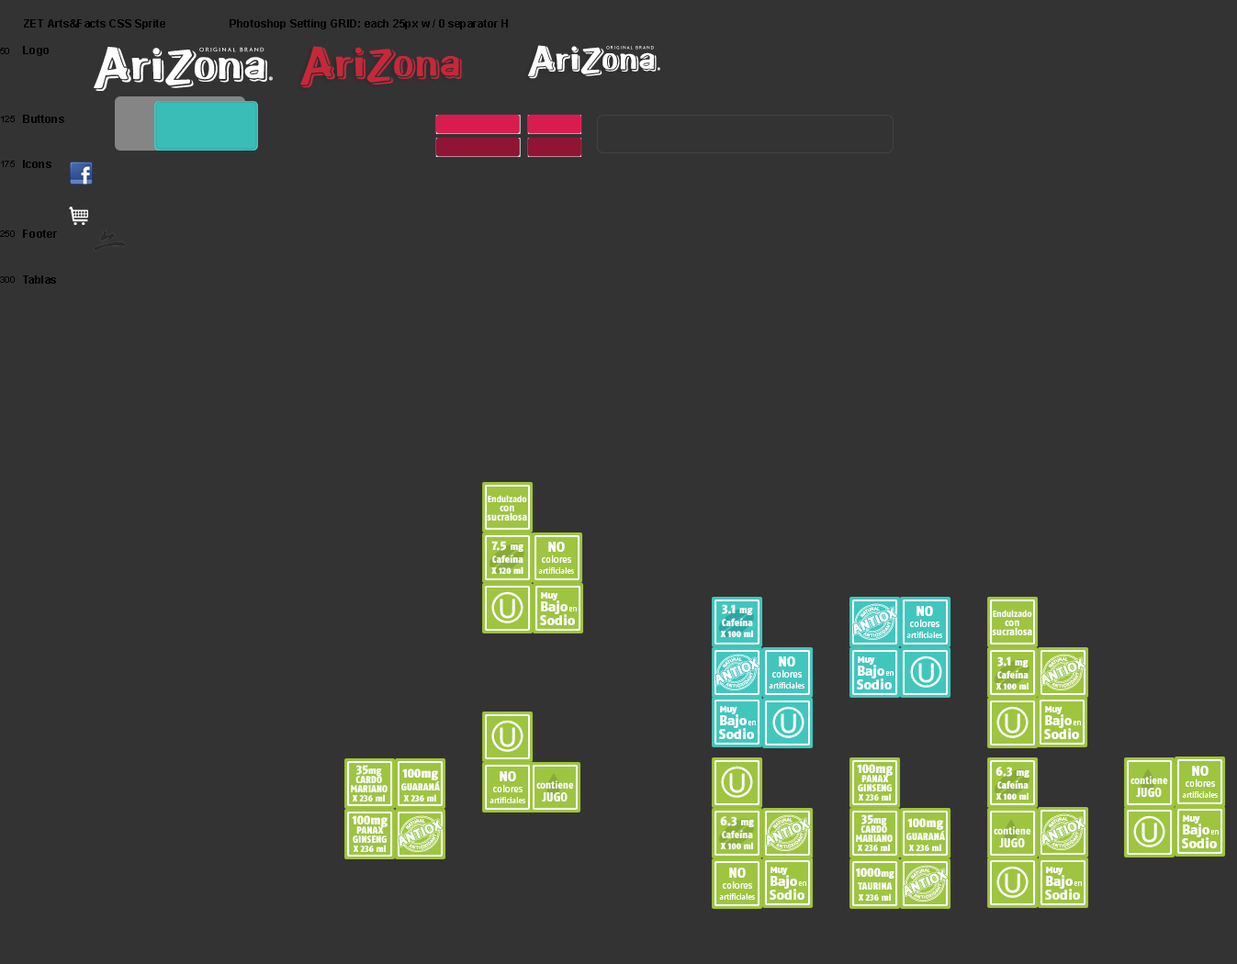
<style>
.page{position:relative;width:1237px;height:964px;background:#333333}
.page>*{position:absolute;margin:0}
.t1{font:11px "Arial-BoldMT";color:#000000}
.t2{font:9.2px "ArialMT";color:#000000}
.t3{font:10.7px/9.2px "FagoCoLf-ExtraBold";letter-spacing:0.01em;color:#ffffff}
.t4{font:9.2px/9.2px "FagoCoLf-ExtraBold";letter-spacing:0.01em;color:#ffffff}
.t5{font:9.2px/11px "FagoCoLf-Black";letter-spacing:0.01em;color:#ffffff}
.t6{font:12.9px/11px "FagoCoLf-Black";letter-spacing:0.01em;color:#ffffff}
.t7{font:10.1px/11px "FagoCoLf-Black";letter-spacing:0.01em;color:#ffffff}
.t8{font:10.1px/12.9px "FagoCoLf-Black";letter-spacing:0.01em;color:#ffffff}
.t9{font:8.3px/11px "FagoNo";letter-spacing:-0.025em;color:#ffffff}
.t10{font:13.8px/11px "FagoNo-ExtraBold";color:#ffffff}
.t11{font:10.1px/11px "FagoNo";letter-spacing:-0.025em;color:#ffffff}
.t12{font:9.2px "FagoNo-ExtraBold";color:#ffffff}
.t13{font:13.8px/13.8px "FagoNo-ExtraBold";color:#ffffff}
.t14{font:7.3px "FagoNo";color:#ffffff}
.t15{font:10.1px/9.2px "FagoCoLf-Black";letter-spacing:0.01em;color:#ffffff}
.t16{font:12.9px/9.2px "FagoCoLf-Black";letter-spacing:0.01em;color:#ffffff}
.t17{font:9.2px/9.2px "FagoCoLf-Black";letter-spacing:0.01em;color:#ffffff}
.t18{font:10.6px/12.9px "FagoCoLf-ExtraBold";letter-spacing:0.01em;color:#ffffff}
.t19{font:12.9px/12.9px "FagoCoLf-ExtraBold";letter-spacing:0.01em;color:#ffffff}
</style>
<div class="page">
<p class="t1" style="left:24px;top:19px;width:141px;height:10px">ZET Arts&amp;Facts CSS Sprite</p>
<p class="t1" style="left:230px;top:19px;width:278px;height:10px">Photoshop Setting GRID: each 25px w / 0 separator H</p>
<p class="t2" style="left:0px;top:48px;width:9px;height:6px">50</p>
<p class="t1" style="left:23px;top:46px;width:26px;height:10px">Logo</p>
<p class="t2" style="left:1px;top:116px;width:14px;height:6px">125</p>
<p class="t1" style="left:23px;top:115px;width:41px;height:8px">Buttons</p>
<p class="t2" style="left:1px;top:161px;width:14px;height:6px">175</p>
<p class="t1" style="left:23px;top:160px;width:28px;height:8px">Icons</p>
<p class="t2" style="left:0px;top:230px;width:15px;height:7px">250</p>
<p class="t1" style="left:23px;top:230px;width:34px;height:8px">Footer</p>
<p class="t2" style="left:0px;top:276px;width:15px;height:7px">300</p>
<p class="t1" style="left:23px;top:275px;width:33px;height:9px">Tablas</p>
<p class="t3" style="left:487px;top:495px;width:40px;height:26px;text-align:center"><span class="t4">Endulzado <br></span>con <br>sucralosa</p>
<p class="t5" style="left:491px;top:541px;width:32px;height:33px;text-align:center"><span class="t6">7.5 </span><span class="t7">mg<br></span><span class="t8">Cafeína <br></span>X 120 ml</p>
<p class="t9" style="left:538px;top:542px;width:36px;height:32px;text-align:center"><span class="t10">NO <br></span><span class="t11">colores<br></span>artificiales</p>
<p class="t12" style="left:541px;top:592px;width:17px;height:9px">Muy</p>
<p class="t13" style="left:540px;top:601px;width:35px;height:24px">Bajo Sodio</p>
<p class="t5" style="left:720px;top:604px;width:33px;height:33px;text-align:center"><span class="t6">3.1 </span><span class="t7">mg<br></span><span class="t8">Cafeína <br></span>X 100 ml</p>
<p class="t14" style="left:568px;top:607px;width:9px;height:5px">en</p>
<p class="t9" style="left:906px;top:606px;width:36px;height:32px;text-align:center"><span class="t10">NO <br></span><span class="t11">colores<br></span>artificiales</p>
<p class="t3" style="left:992px;top:610px;width:40px;height:25px;text-align:center"><span class="t4">Endulzado <br></span>con <br>sucralosa</p>
<p class="t9" style="left:769px;top:657px;width:35px;height:32px;text-align:center"><span class="t10">NO <br></span><span class="t11">colores<br></span>artificiales</p>
<p class="t13" style="left:857px;top:665px;width:35px;height:25px">Bajo Sodio</p>
<p class="t12" style="left:858px;top:657px;width:17px;height:8px">Muy</p>
<p class="t5" style="left:995px;top:657px;width:33px;height:33px;text-align:center"><span class="t6">3.1 </span><span class="t7">mg<br></span><span class="t8">Cafeína <br></span>X 100 ml</p>
<p class="t14" style="left:885px;top:671px;width:8px;height:5px">en</p>
<p class="t12" style="left:720px;top:706px;width:17px;height:8px">Muy</p>
<p class="t12" style="left:1045px;top:706px;width:17px;height:8px">Muy</p>
<p class="t13" style="left:719px;top:714px;width:35px;height:25px">Bajo Sodio</p>
<p class="t14" style="left:747px;top:721px;width:9px;height:4px">en</p>
<p class="t13" style="left:1044px;top:714px;width:35px;height:25px">Bajo Sodio</p>
<p class="t14" style="left:1072px;top:721px;width:9px;height:4px">en</p>
<p class="t15" style="left:351px;top:765px;width:36px;height:37px;text-align:center"><span class="t16">35</span>mg <br>CARDO <br>MARIANO <br><span class="t17">X 236 ml</span></p>
<p class="t5" style="left:401px;top:769px;width:39px;height:33px;text-align:center"><span class="t6">100mg<br></span><span class="t8">GUARANÁ <br></span>X 236 ml</p>
<p class="t9" style="left:489px;top:771px;width:36px;height:32px;text-align:center"><span class="t10">NO <br></span><span class="t11">colores<br></span>artificiales</p>
<p class="t15" style="left:857px;top:764px;width:35px;height:37px;text-align:center"><span class="t16">100mg<br></span>PANAX <br>GINSENG<br><span class="t17">X 236 ml</span></p>
<p class="t5" style="left:995px;top:767px;width:34px;height:33px;text-align:center"><span class="t6">6.3 </span><span class="t7">mg<br></span><span class="t8">Cafeína <br></span>X 100 ml</p>
<p class="t9" style="left:1182px;top:766px;width:36px;height:32px;text-align:center"><span class="t10">NO <br></span><span class="t11">colores<br></span>artificiales</p>
<p class="t18" style="left:536px;top:780px;width:38px;height:22px;text-align:center">contiene<br><span class="t19">JUGO</span></p>
<p class="t18" style="left:1130px;top:776px;width:38px;height:21px;text-align:center">contiene<br><span class="t19">JUGO</span></p>
<p class="t15" style="left:352px;top:815px;width:35px;height:37px;text-align:center"><span class="t16">100mg<br></span>PANAX <br>GINSENG<br><span class="t17">X 236 ml</span></p>
<p class="t5" style="left:720px;top:816px;width:34px;height:33px;text-align:center"><span class="t6">6.3 </span><span class="t7">mg<br></span><span class="t8">Cafeína <br></span>X 100 ml</p>
<p class="t15" style="left:856px;top:814px;width:36px;height:37px;text-align:center"><span class="t16">35</span>mg <br>CARDO <br>MARIANO <br><span class="t17">X 236 ml</span></p>
<p class="t5" style="left:906px;top:818px;width:39px;height:33px;text-align:center"><span class="t6">100mg<br></span><span class="t8">GUARANÁ <br></span>X 236 ml</p>
<p class="t12" style="left:1183px;top:815px;width:17px;height:9px">Muy</p>
<p class="t18" style="left:993px;top:826px;width:38px;height:22px;text-align:center">contiene<br><span class="t19">JUGO</span></p>
<p class="t13" style="left:1182px;top:824px;width:35px;height:24px">Bajo Sodio</p>
<p class="t14" style="left:1210px;top:830px;width:8px;height:5px">en</p>
<p class="t9" style="left:719px;top:868px;width:36px;height:32px;text-align:center"><span class="t10">NO <br></span><span class="t11">colores<br></span>artificiales</p>
<p class="t12" style="left:770px;top:867px;width:18px;height:8px">Muy</p>
<p class="t5" style="left:856px;top:868px;width:38px;height:33px;text-align:center"><span class="t6">1000</span><span class="t7">mg<br></span><span class="t8">TAURINA<br></span>X 236 ml</p>
<p class="t12" style="left:1046px;top:867px;width:17px;height:8px">Muy</p>
<p class="t13" style="left:769px;top:875px;width:35px;height:25px">Bajo Sodio</p>
<p class="t14" style="left:798px;top:881px;width:8px;height:5px">en</p>
<p class="t13" style="left:1045px;top:875px;width:35px;height:25px">Bajo Sodio</p>
<p class="t14" style="left:1073px;top:881px;width:9px;height:5px">en</p>
</div>
